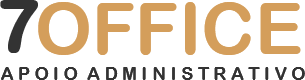
<style>
.page{position:relative;width:305px;height:80px;background:#ffffff}
.page>*{position:absolute;margin:0}
.t1{font:72px "ArialRoundedMTBold";color:#333333;font-weight:bold}
.t2{font:72px "ArialRoundedMTBold";color:#d49e5b}
.t3{font:17.5px "ArialRoundedMTBold";color:#333333}
</style>
<div class="page">
<p class="t1" style="left:0px;top:0px;width:38px;height:53px">7</p>
<p class="t2" style="left:38px;top:2px;width:263px;height:53px">OFFICE</p>
<p class="t3" style="left:1px;top:67px;width:304px;height:13px">A P O I O  A D M I N I S T R A T I V O</p>
</div>
